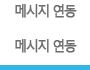
<style>
.page{position:relative;width:90px;height:70px;background:#ffffff}
.page>*{position:absolute;margin:0}
.t1{font:14px "MalgunGothicRegular";letter-spacing:-0.15em;color:#6e6e6e;font-weight:bold;scale:0.95 1}
</style>
<div class="page">
<p class="t1" style="left:15px;top:4px;width:62px;height:14px">메시지 연동</p>
<p class="t1" style="left:15px;top:39px;width:62px;height:14px">메시지 연동</p>
</div>
